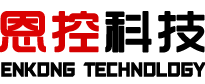
<style>
.page{position:relative;width:205px;height:84px;background:#ffffff}
.page>*{position:absolute;margin:0}
.t1{font:48px "TRENDS";letter-spacing:0.035em;color:#000000;font-weight:bold;scale:1.03 1}
.t2{font:48px "TRENDS";letter-spacing:0.035em;color:#db0202;font-weight:bold;scale:1.03 1}
.t3{font:48px "TRENDS";letter-spacing:0.035em;color:#d40000;font-weight:bold;scale:1.03 1}
.t4{font:15.7px "REEJI-HonghuangLi-BlodGB1.0";letter-spacing:-0.01em;color:#010101;font-weight:bold}
</style>
<div class="page">
<p class="t1" style="left:0px;top:11px;width:205px;height:42px"><span class="t2">恩</span><span class="t3">控</span>科技</p>
<p class="t4" style="left:1px;top:62px;width:205px;height:15px">ENKONG TECHNOLOGY</p>
</div>
